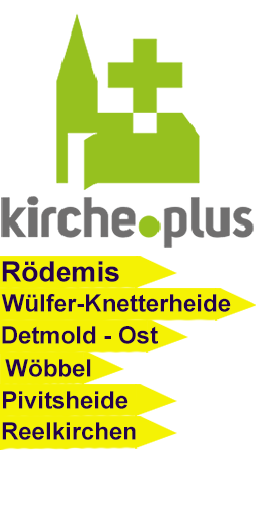
<style>
.page{position:relative;width:256px;height:512px;background:#ffffff}
.page>*{position:absolute;margin:0}
.t1{font:28.2px "Arial-BoldMT";color:#24024b}
.t2{font:24px "Arial-BoldMT";color:#24024b}
</style>
<div class="page">
<p class="t1" style="left:2px;top:261px;width:117px;height:21px">Rödemis</p>
<p class="t2" style="left:1px;top:294px;width:230px;height:18px">Wülfer-Knetterheide</p>
<p class="t2" style="left:2px;top:326px;width:156px;height:18px">Detmold - Ost</p>
<p class="t2" style="left:5px;top:359px;width:86px;height:18px">Wöbbel</p>
<p class="t2" style="left:3px;top:391px;width:125px;height:18px">Pivitsheide</p>
<p class="t2" style="left:2px;top:422px;width:134px;height:18px">Reelkirchen</p>
</div>
